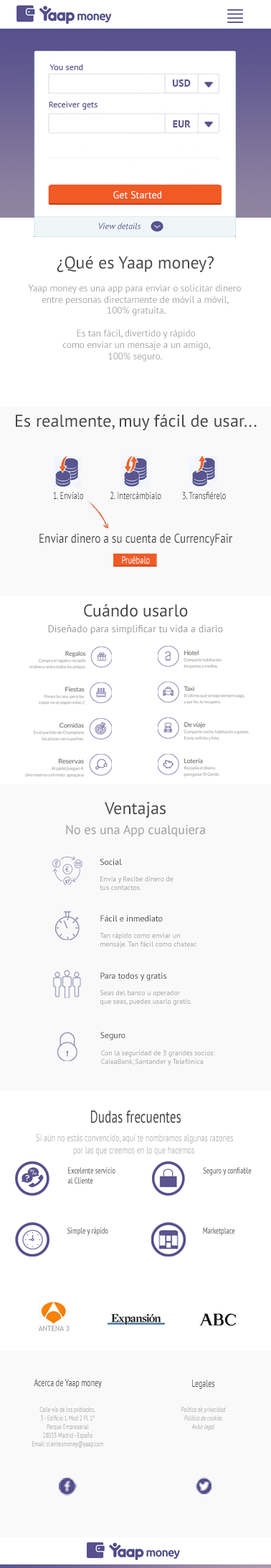
<style>
.page{position:relative;width:271px;height:1568px;background:#ffffff}
.page>*{position:absolute;margin:0}
.t1{font:8.6px "PTSans-Regular";color:#5a558f}
.t2{font:10px "PTSans-Bold";color:#5a558f}
.t3{font:10px "PTSans-Regular";color:#ffffff}
.t4{font:8.6px "PTSans-Italic";color:#5a558f}
.t5{font:17.2px "PTSans-Regular";color:#464646}
.t6{font:9.4px "PTSans-Regular";color:#a0a0a0}
.t7{font:10px "PTSans-Regular";color:#464646;scale:0.75 1}
.t8{font:12.9px "PTSans-Regular";color:#464646;scale:0.85 1}
.t9{font:10px "PTSans-Regular";color:#ffffff;scale:0.75 1}
.t10{font:10px "PTSans-Regular";color:#a0a0a0}
.t11{font:12.9px "PTSans-Regular";color:#a0a0a0}
.t12{font:8.6px "PTSans-Regular";color:#464646}
.t13{font:7.2px "PTSans-Regular";color:#a0a0a0}
.t14{font:17.2px "PTSans-Regular";color:#464646;scale:0.72 1}
.t15{font:10px "PTSans-Regular";color:#b4b4b4;scale:0.72 1}
.t16{font:8.6px "PTSans-Regular";color:#464646;scale:0.72 1}
.t17{font:8.6px "PTSans-Regular";scale:0.72 1}
.t18{font:10px "PTSans-Regular";color:#464646;scale:0.71 1}
.t19{font:7.2px "PTSans-Regular";color:#a0a0a0;scale:0.71 1}
.t20{font:7.2px "PTSans-Italic";color:#a0a0a0;scale:0.71 1}
</style>
<div class="page">
<p class="t1" style="left:49px;top:64px;width:34px;height:6px">You send</p>
<p class="t2" style="left:172px;top:79px;width:18px;height:8px">USD</p>
<p class="t1" style="left:49px;top:102px;width:48px;height:8px">Receiver gets</p>
<p class="t2" style="left:173px;top:120px;width:17px;height:7px">EUR</p>
<p class="t3" style="left:113px;top:191px;width:49px;height:8px">Get Started</p>
<p class="t4" style="left:99px;top:223px;width:42px;height:6px">View details</p>
<p class="t5" style="left:57px;top:256px;width:156px;height:16px">¿Qué es Yaap money?</p>
<p class="t6" style="left:28px;top:284px;width:213px;height:78px;text-align:center">Yaap money es una app para enviar o solicitar dinero <br>entre personas directamente de móvil a móvil, <br>100% gratuita.<br><br>Es tan fácil, divertido y rápido<br>como enviar un mensaje a un amigo,<br>100% seguro.</p>
<p class="t5" style="left:16px;top:414px;width:240px;height:16px">Es realmente, muy fácil de usar...</p>
<p class="t7" style="left:53px;top:492px;width:30px;height:8px">1. Envíalo</p>
<p class="t7" style="left:110px;top:492px;width:51px;height:8px">2. Intercámbialo</p>
<p class="t7" style="left:182px;top:492px;width:44px;height:8px">3. Transfiérelo</p>
<p class="t8" style="left:39px;top:533px;width:193px;height:13px">Enviar dinero a su cuenta de CurrencyFair</p>
<p class="t9" style="left:122px;top:556px;width:28px;height:8px">Pruébalo</p>
<p class="t5" style="left:84px;top:604px;width:104px;height:13px">Cuándo usarlo</p>
<p class="t10" style="left:48px;top:625px;width:175px;height:9px">Diseñado para simplificar tu vida a diario</p>
<p class="t5" style="left:105px;top:802px;width:60px;height:16px">Ventajas</p>
<p class="t11" style="left:66px;top:825px;width:139px;height:12px">No es una App cualquiera</p>
<p class="t12" style="left:100px;top:858px;width:22px;height:7px">Social</p>
<p class="t13" style="left:100px;top:876px;width:73px;height:14px">Envía y Recibe dinero de<br>tus contactos.</p>
<p class="t12" style="left:100px;top:915px;width:63px;height:6px">Fácil e inmediato</p>
<p class="t13" style="left:100px;top:932px;width:97px;height:16px">Tan rápido como enviar un <br>mensaje. Tan fácil como chatear.</p>
<p class="t12" style="left:100px;top:972px;width:66px;height:9px">Para todos y gratis</p>
<p class="t13" style="left:100px;top:990px;width:91px;height:15px">Seas del banco u operador <br>que seas, puedes usarlo gratis.</p>
<p class="t12" style="left:100px;top:1032px;width:25px;height:8px">Seguro</p>
<p class="t13" style="left:101px;top:1050px;width:114px;height:15px">Con la seguridad de 3 grandes socios:<br>CaixaBank, Santander y Telefónica</p>
<p class="t14" style="left:91px;top:1110px;width:89px;height:13px">Dudas frecuentes</p>
<p class="t15" style="left:36px;top:1134px;width:197px;height:22px;text-align:center">Si aún no estás convencido, aquí te nombramos algunas razones<br>por las que creemos en lo que hacemos</p>
<p class="t16" style="left:68px;top:1167px;width:47px;height:17px">Excelente servicio <br>al Cliente</p>
<p class="t16" style="left:203px;top:1167px;width:48px;height:9px">Seguro y confiable</p>
<p class="t17" style="left:67px;top:1227px;width:41px;height:9px">Simple y rápido</p>
<p class="t16" style="left:203px;top:1227px;width:32px;height:9px">Marketplace</p>
<p class="t18" style="left:34px;top:1379px;width:68px;height:9px">Acerca de Yaap money</p>
<p class="t18" style="left:192px;top:1380px;width:22px;height:9px">Legales</p>
<p class="t19" style="left:32px;top:1406px;width:71px;height:42px;text-align:center">Calle vía de los poblados, <br>3 - Edificio 1 Mod 2 Pl. 1º<br>Parque Empresarial<br>28033 Madrid - España<br>Email: clientesmoney@yaap.com</p>
<p class="t20" style="left:180px;top:1406px;width:46px;height:25px;text-align:center">Política de privacidad<br>Política de cookies<br>Aviso legal</p>
</div>
